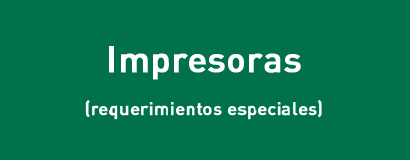
<style>
.page{position:relative;width:410px;height:160px;background:#00704d}
.page>*{position:absolute;margin:0}
.t1{font:18px "DINPro-Medium";color:#ffffff;font-weight:bold}
.t2{font:36px "DINPro-Medium";color:#ffffff;font-weight:bold}
</style>
<div class="page">
<p class="t1" style="left:85px;top:46px;width:237px;height:74px;text-align:center"><span class="t2">Impresoras<br><br></span>(requerimientos especiales)</p>
</div>
